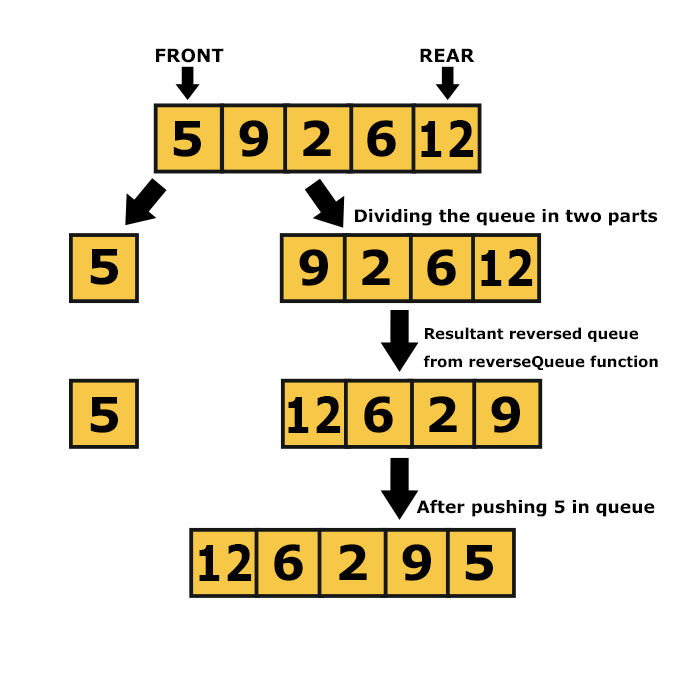
<style>
.page{position:relative;width:700px;height:700px;background:#ffffff}
.page>*{position:absolute;margin:0}
.t1{font:18.4px "Verdana-Bold";color:#000000}
.t2{font:48.2px "Verdana-Bold";color:#000000}
.t3{font:48.7px "Verdana-Bold";color:#000000;scale:0.85 1}
.t4{font:17.2px "Verdana-Bold";color:#000000}
.t5{font:14.9px/27.5px "Verdana-Bold";color:#000000}
</style>
<div class="page">
<p class="t1" style="left:156px;top:48px;width:68px;height:15px">FRONT</p>
<p class="t1" style="left:420px;top:48px;width:55px;height:14px">REAR</p>
<p class="t2" style="left:173px;top:121px;width:28px;height:36px">5</p>
<p class="t2" style="left:239px;top:120px;width:29px;height:37px">9</p>
<p class="t2" style="left:303px;top:120px;width:28px;height:36px">2</p>
<p class="t2" style="left:367px;top:120px;width:29px;height:37px">6</p>
<p class="t3" style="left:421px;top:120px;width:53px;height:37px">12</p>
<p class="t4" style="left:355px;top:209px;width:303px;height:17px">Dividing the queue in two parts</p>
<p class="t2" style="left:90px;top:249px;width:28px;height:36px">5</p>
<p class="t2" style="left:299px;top:249px;width:29px;height:37px">9</p>
<p class="t2" style="left:362px;top:249px;width:28px;height:36px">2</p>
<p class="t2" style="left:427px;top:249px;width:29px;height:37px">6</p>
<p class="t3" style="left:481px;top:249px;width:52px;height:37px">12</p>
<p class="t5" style="left:423px;top:327px;width:235px;height:43px">Resultant reversed queue from reverseQueue function</p>
<p class="t2" style="left:90px;top:397px;width:28px;height:36px">5</p>
<p class="t3" style="left:288px;top:396px;width:53px;height:37px">12</p>
<p class="t2" style="left:364px;top:396px;width:29px;height:37px">6</p>
<p class="t2" style="left:429px;top:396px;width:28px;height:36px">2</p>
<p class="t2" style="left:491px;top:396px;width:29px;height:37px">9</p>
<p class="t4" style="left:416px;top:499px;width:239px;height:18px">After pushing 5 in queue</p>
<p class="t3" style="left:199px;top:544px;width:53px;height:37px">12</p>
<p class="t2" style="left:274px;top:544px;width:29px;height:37px">6</p>
<p class="t2" style="left:339px;top:544px;width:28px;height:36px">2</p>
<p class="t2" style="left:402px;top:544px;width:29px;height:37px">9</p>
<p class="t2" style="left:465px;top:545px;width:28px;height:36px">5</p>
</div>
